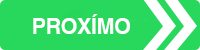
<style>
.page{position:relative;width:200px;height:50px;background:#28d85d}
.page>*{position:absolute;margin:0}
.t1{font:21.7px "Helvetica-Bold";letter-spacing:-0.025em;color:#ffffff}
</style>
<div class="page">
<p class="t1" style="left:33px;top:14px;width:97px;height:20px">PROXÍMO</p>
</div>
